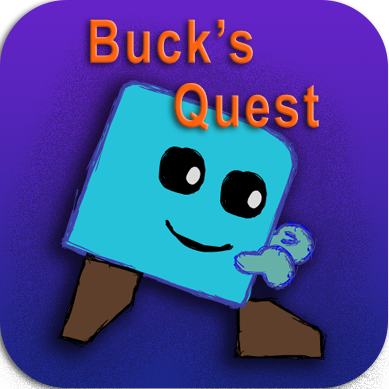
<style>
.page{position:relative;width:389px;height:389px}
.page>*{position:absolute;margin:0}
.t1{font:60px/32px "Arial-BoldMT";letter-spacing:0.061em;scale:0.79 1}
</style>
<div class="page">
<p class="t1" style="left:90px;top:19px;width:229px;height:112px">Buck’s <br><br>          Quest</p>
</div>
